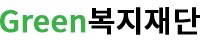
<style>
.page{position:relative;width:200px;height:40px;background:#ffffff}
.page>*{position:absolute;margin:0}
.t1{font:30px "NotoSansKR-Medium";letter-spacing:-0.005em;color:#3cb149;font-weight:bold}
.t2{font:30px "NotoSansKR-Medium";letter-spacing:-0.005em;color:#000000;font-weight:bold}
</style>
<div class="page">
<p class="t1" style="left:0px;top:7px;width:200px;height:28px">Green<span class="t2">복지재단</span></p>
</div>
